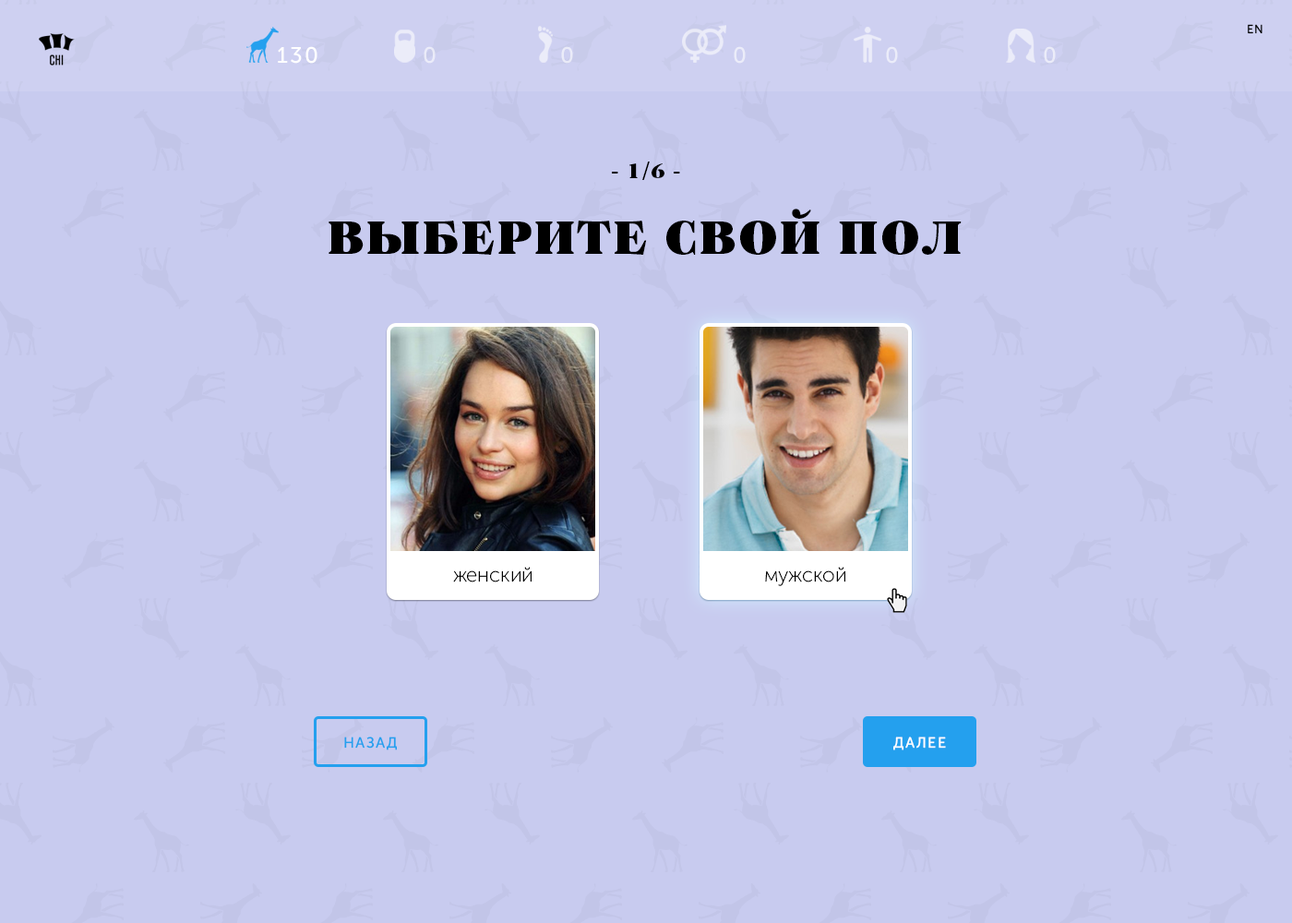
<style>
.page{position:relative;width:1292px;height:923px;background:#c8cbef}
.page>*{position:absolute;margin:0}
.t1{font:12px "MuseoSansCyrillic-500";letter-spacing:0.1em;color:#000000;text-transform:uppercase}
.t2{font:22.1px "MuseoSansCyrillic-500";letter-spacing:0.1em;color:#ffffff;text-transform:uppercase}
.t3{font:22.1px "PFRegalTextPro-UBlack";letter-spacing:0.05em;color:#000000;text-transform:uppercase}
.t4{font:47.9px "PFRegalTextPro-UBlack";letter-spacing:0.05em;color:#000000;text-transform:uppercase}
.t5{font:20.3px "MuseoSansCyrillic-100";color:#000000}
.t6{font:14.8px "MuseoSansCyrillic-500";letter-spacing:0.1em;color:#24a0ee;text-transform:uppercase}
.t7{font:14.8px "MuseoSansCyrillic-500";letter-spacing:0.1em;color:#ffffff;text-transform:uppercase}
</style>
<div class="page">
<p class="t1" style="left:1248px;top:24px;width:15px;height:10px">En</p>
<p class="t2" style="left:278px;top:46px;width:39px;height:18px">130</p>
<p class="t2" style="left:424px;top:46px;width:12px;height:18px">0</p>
<p class="t2" style="left:561px;top:46px;width:12px;height:18px">0</p>
<p class="t2" style="left:734px;top:46px;width:12px;height:18px">0</p>
<p class="t2" style="left:886px;top:46px;width:12px;height:18px">0</p>
<p class="t2" style="left:1044px;top:46px;width:12px;height:18px">0</p>
<p class="t3" style="left:612px;top:162px;width:68px;height:18px">- 1/6 -</p>
<p class="t4" style="left:329px;top:209px;width:633px;height:46px">Выберите свой пол</p>
<p class="t5" style="left:453px;top:567px;width:79px;height:15px">женский</p>
<p class="t5" style="left:765px;top:567px;width:80px;height:19px">мужской</p>
<p class="t6" style="left:344px;top:736px;width:53px;height:14px">назад</p>
<p class="t7" style="left:893px;top:736px;width:53px;height:14px">далее</p>
</div>
